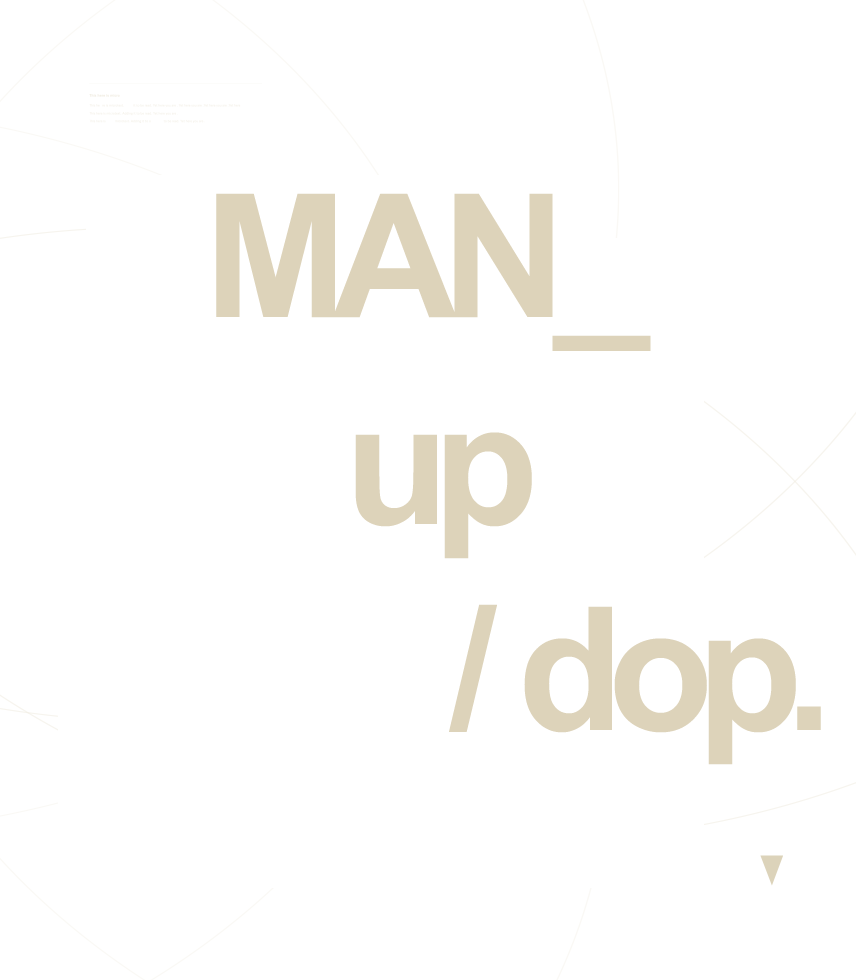
<style>
.page{position:relative;width:856px;height:980px;background:#ffffff}
.page>*{position:absolute;margin:0}
.t1{font:172px "Arial-BoldMT";letter-spacing:-0.075em;color:#ddd3ba}
</style>
<div class="page">
<p class="t1" style="left:216px;top:193px;width:605px;height:572px">MAN_<br>    up<br>       / dop.</p>
</div>
